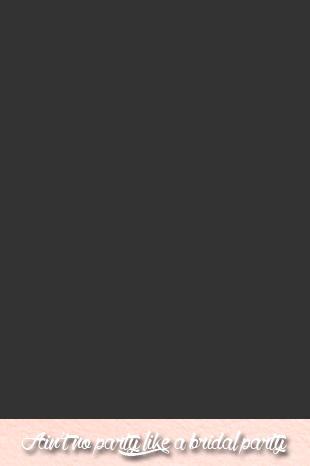
<style>
.page{position:relative;width:310px;height:466px;background:#333333}
.page>*{position:absolute;margin:0}
.t1{font:40px "WolfintheCity";color:#ffffff}
</style>
<div class="page">
<p class="t1" style="left:21px;top:430px;width:266px;height:26px">Ain’t no party like a bridal party</p>
</div>
